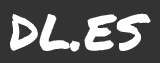
<style>
.page{position:relative;width:160px;height:63px;background:#333333}
.page>*{position:absolute;margin:0}
.t1{font:60px "PermanentMarker-Regular";color:#ffffff}
</style>
<div class="page">
<p class="t1" style="left:10px;top:13px;width:141px;height:39px">dl.es</p>
</div>
